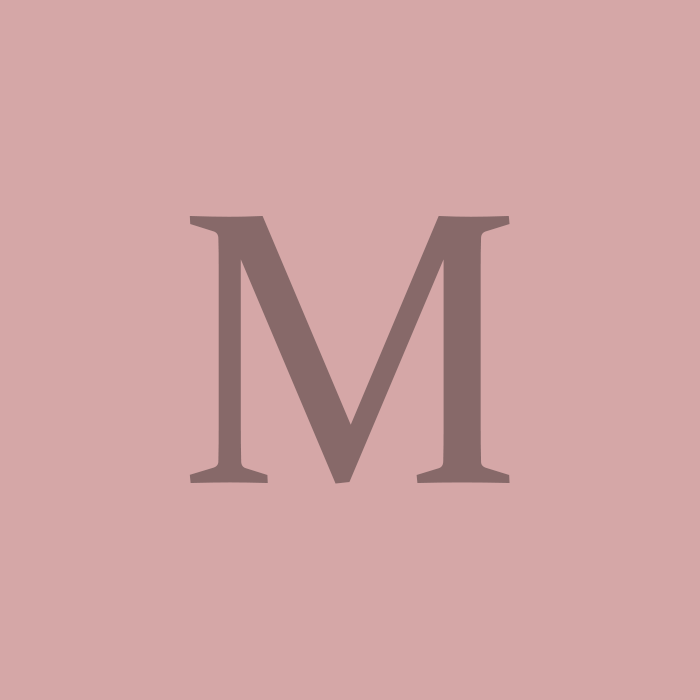
<style>
.page{position:relative;width:700px;height:700px;background:#d5a7a7}
.page>*{position:absolute;margin:0}
.t1{font:388.9px "Constantia";color:#876969}
</style>
<div class="page">
<p class="t1" style="left:189px;top:216px;width:321px;height:268px">M</p>
</div>
